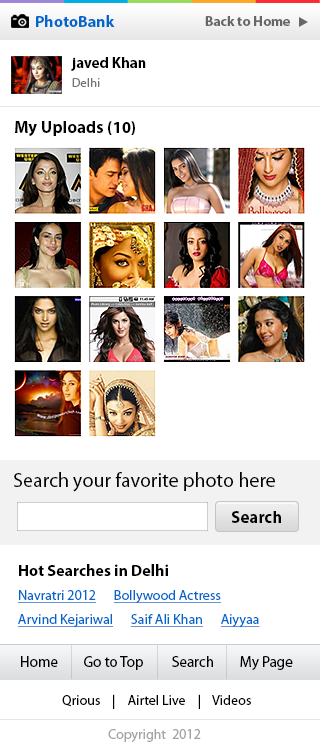
<style>
.page{position:relative;width:320px;height:753px;background:#ffffff}
.page>*{position:absolute;margin:0}
.t1{font:16px "MyriadPro-Bold";color:#0066cc}
.t2{font:14px "MyriadPro-Bold";color:#666666}
.t3{font:15px "MyriadPro-Bold";color:#000000}
.t4{font:12px "MyriadPro-Regular";letter-spacing:0.04em;color:#737373}
.t5{font:17px "MyriadPro-Bold";color:#000000}
.t6{font:20px "MyriadPro-Regular";color:#000000}
.t7{font:16px "MyriadPro-Bold";color:#000000}
.t8{font:14px/24px "MyriadPro-Regular";color:#0066cc;text-decoration:underline}
.t9{font:15px "MyriadPro-Regular";color:#000000}
.t10{font:14px "MyriadPro-Regular";color:#000000}
.t11{font:14px "MyriadPro-Regular";color:#a3a3a3}
</style>
<div class="page">
<p class="t1" style="left:36px;top:15px;width:79px;height:12px">PhotoBank</p>
<p class="t2" style="left:205px;top:16px;width:85px;height:10px">Back to Home</p>
<p class="t3" style="left:71px;top:57px;width:75px;height:14px">javed Khan</p>
<p class="t4" style="left:72px;top:78px;width:28px;height:9px">Delhi</p>
<p class="t5" style="left:15px;top:121px;width:120px;height:15px">My Uploads (10)</p>
<p class="t6" style="left:14px;top:472px;width:261px;height:20px">Search your favorite photo here</p>
<p class="t5" style="left:231px;top:511px;width:50px;height:12px">Search</p>
<p class="t7" style="left:19px;top:564px;width:149px;height:12px">Hot Searches in Delhi</p>
<p class="t8" style="left:18px;top:590px;width:242px;height:37px">Navratri 2012      Bollywood Actress     <br>Arvind Kejariwal      Saif Ali Khan      Aiyyaa</p>
<p class="t9" style="left:21px;top:656px;width:272px;height:14px">Home        Go to Top         Search        My Page</p>
<p class="t10" style="left:62px;top:694px;width:189px;height:15px">Qrious    |    Airtel Live    |    Videos</p>
<p class="t11" style="left:108px;top:729px;width:93px;height:13px">Copyright  2012</p>
</div>
